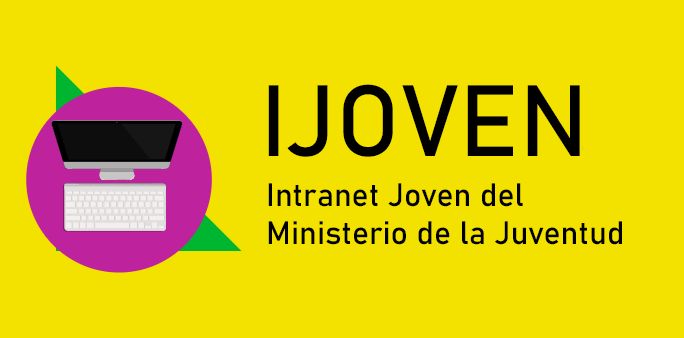
<style>
.page{position:relative;width:684px;height:338px;background:#f3e200}
.page>*{position:absolute;margin:0}
.t1{font:99.5px "Bahnschrift";color:#000000}
.t2{font:32px "Bahnschrift";color:#000000}
</style>
<div class="page">
<p class="t1" style="left:268px;top:84px;width:312px;height:73px">IJOVEN</p>
<p class="t2" style="left:268px;top:183px;width:354px;height:62px">Intranet Joven del<br>Ministerio de la Juventud</p>
</div>
